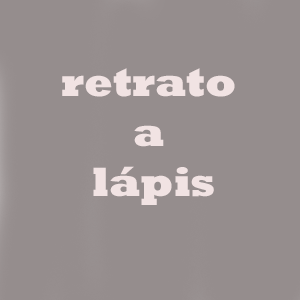
<style>
.page{position:relative;width:300px;height:300px;background:#958d8d}
.page>*{position:absolute;margin:0}
.t1{font:41.7px "Rockwell-ExtraBold";color:#f1e3e3}
</style>
<div class="page">
<p class="t1" style="left:62px;top:68px;width:173px;height:137px;text-align:center">retrato <br>a <br>lápis</p>
</div>
